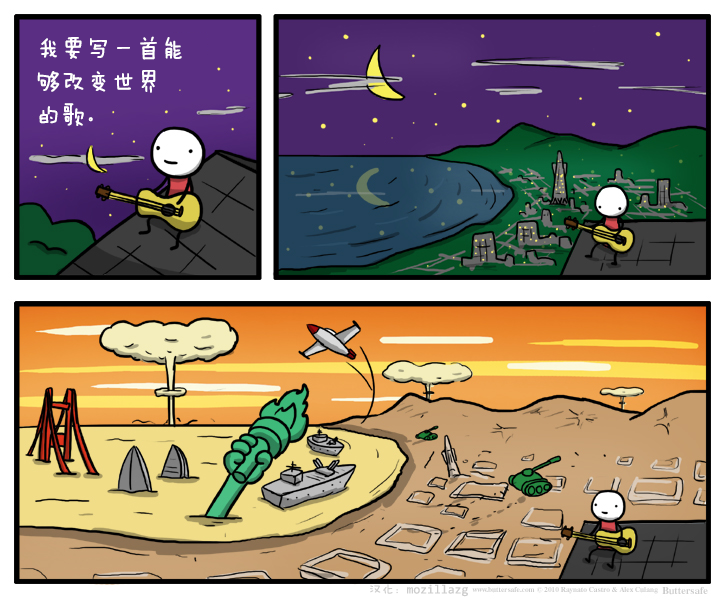
<style>
.page{position:relative;width:725px;height:604px}
.page>*{position:absolute;margin:0}
.t1{font:25px/33.3px "FZMWJW--GB1-0";color:#ffffff}
.t2{font:12.5px "YaHei-Consolas-Hybrid";color:#cccccc}
.t3{font:12.5px "FZMWJW--GB1-0";color:#cccccc}
</style>
<div class="page">
<p class="t1" style="left:37px;top:36px;width:145px;height:90px">我要写一首能<br>够改变世界<br>的歌。</p>
<p class="t2" style="left:370px;top:584px;width:98px;height:13px"><span class="t3">汉化：</span>mozillazg</p>
</div>
